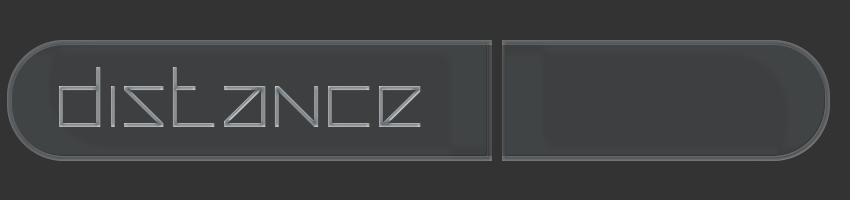
<style>
.page{position:relative;width:850px;height:200px;background:#333333}
.page>*{position:absolute;margin:0}
.t1{font:120px "AuricomRegular";letter-spacing:0.05em}
</style>
<div class="page">
<p class="t1" style="left:59px;top:67px;width:362px;height:60px">Distance</p>
</div>
